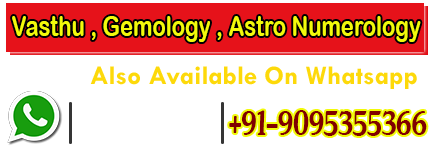
<style>
.page{position:relative;width:431px;height:150px;background:#ffffff}
.page>*{position:absolute;margin:0}
.t1{font:28.5px "ArialRoundedMTBold";color:#f2fa0b;scale:0.77 1}
.t2{font:37.8px "ARJULIAN";color:#800000;scale:0.72 1}
</style>
<div class="page">
<p class="t1" style="left:12px;top:16px;width:409px;height:26px">Vasthu , Gemology , Astro Numerology</p>
<p class="t2" style="left:229px;top:110px;width:198px;height:26px">+91-9095355366</p>
</div>
